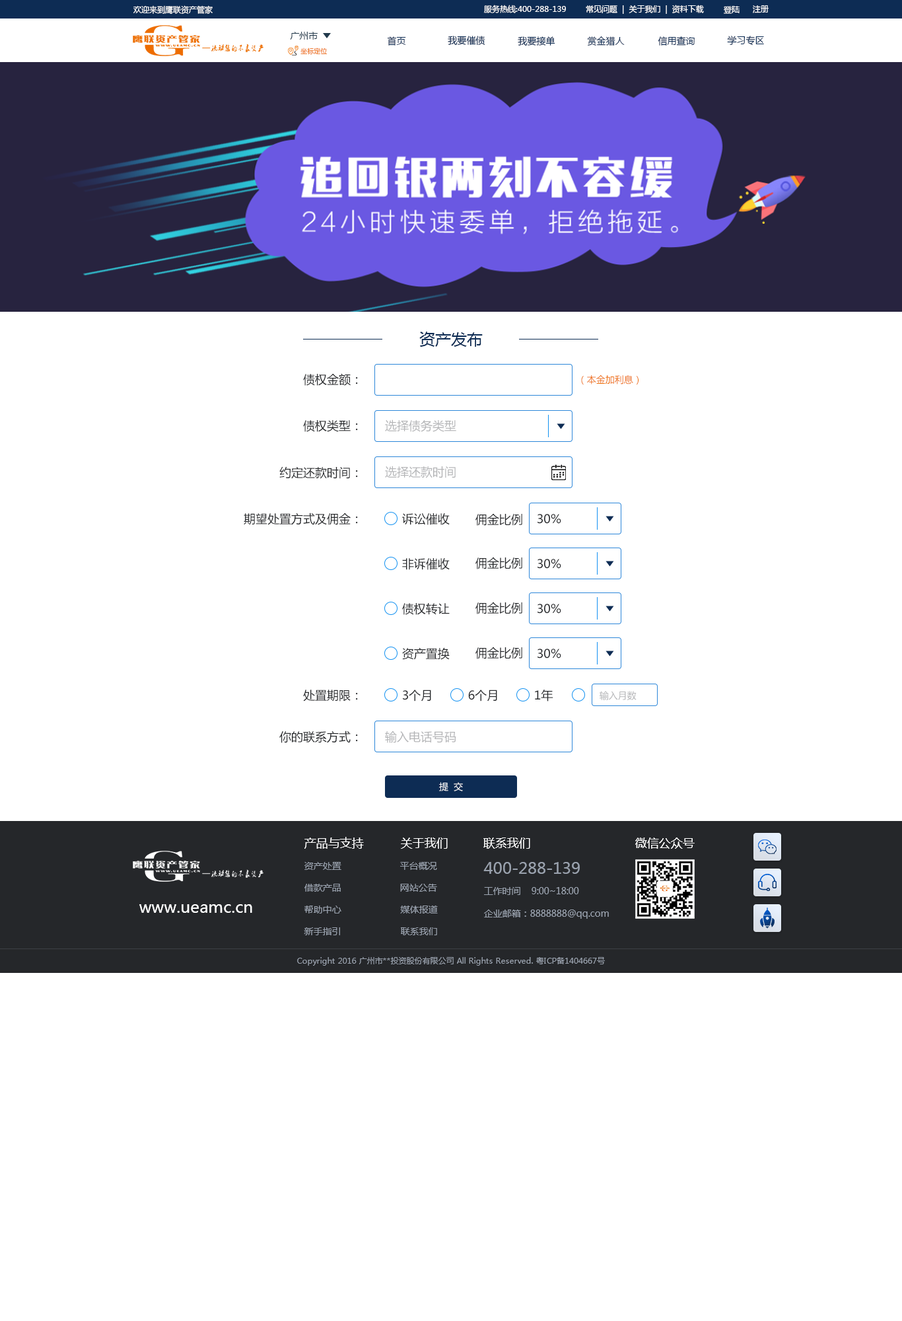
<style>
.page{position:relative;width:902px;height:1321px;background:#ffffff}
.page>*{position:absolute;margin:0}
.t1{font:7.9px "MicrosoftYaHei";color:#fefefe}
.t2{font:9.2px "MicrosoftYaHei";color:#21394b}
.t3{font:9.2px "MicrosoftYaHei";color:#0d2c54}
.t4{font:6.6px "MicrosoftYaHei"}
.t5{font:15.9px "MicrosoftYaHei";color:#0d2c54}
.t6{font:11.9px "MicrosoftYaHei";color:#25272a}
.t7{font:9.2px "MicrosoftYaHei";color:#ed6d00}
.t8{font:11.9px "MicrosoftYaHei";color:#b4b5b7}
.t9{font:9.2px "MicrosoftYaHei";color:#b4b5b7}
.t10{font:9.2px "MicrosoftYaHei";color:#ffffff}
.t11{font:11.9px "MicrosoftYaHei";color:#ffffff}
.t12{font:9.2px "MicrosoftYaHei";color:#99a1ad}
.t13{font:15.9px "MicrosoftYaHei";color:#99a1ad}
.t14{font:15.9px "MicrosoftYaHei";color:#ffffff}
.t15{font:7.9px "MicrosoftYaHei";color:#99a1ad}
</style>
<div class="page">
<p class="t1" style="left:133px;top:5px;width:80px;height:9px">欢迎来到鹰联资产管家</p>
<p class="t1" style="left:484px;top:5px;width:82px;height:8px">服务热线:400-288-139</p>
<p class="t1" style="left:586px;top:5px;width:118px;height:9px">常见问题  |  关于我们  |  资料下载</p>
<p class="t1" style="left:724px;top:6px;width:16px;height:8px">登陆</p>
<p class="t1" style="left:753px;top:5px;width:16px;height:8px">注册</p>
<p class="t2" style="left:290px;top:32px;width:28px;height:8px">广州市</p>
<p class="t3" style="left:387px;top:36px;width:19px;height:10px">首页</p>
<p class="t3" style="left:448px;top:36px;width:38px;height:10px">我要催债</p>
<p class="t3" style="left:518px;top:36px;width:38px;height:10px">我要接单</p>
<p class="t3" style="left:588px;top:36px;width:37px;height:10px">赏金猎人</p>
<p class="t3" style="left:658px;top:36px;width:37px;height:10px">信用查询</p>
<p class="t3" style="left:727px;top:36px;width:37px;height:10px">学习专区</p>
<p class="t4" style="left:301px;top:48px;width:27px;height:7px">坐标定位</p>
<p class="t5" style="left:420px;top:332px;width:63px;height:15px">资产发布</p>
<p class="t6" style="left:303px;top:373px;width:55px;height:13px">债权金额：</p>
<p class="t7" style="left:581px;top:375px;width:58px;height:10px">（本金加利息）</p>
<p class="t6" style="left:303px;top:420px;width:55px;height:12px">债权类型：</p>
<p class="t8" style="left:385px;top:420px;width:72px;height:12px">选择债务类型</p>
<p class="t6" style="left:279px;top:466px;width:79px;height:13px">约定还款时间：</p>
<p class="t8" style="left:385px;top:466px;width:71px;height:12px">选择还款时间</p>
<p class="t6" style="left:244px;top:513px;width:114px;height:12px">期望处置方式及佣金：</p>
<p class="t6" style="left:402px;top:513px;width:48px;height:12px">诉讼催收</p>
<p class="t6" style="left:476px;top:514px;width:47px;height:12px">佣金比例</p>
<p class="t6" style="left:538px;top:514px;width:24px;height:10px">30%</p>
<p class="t6" style="left:476px;top:558px;width:47px;height:11px">佣金比例</p>
<p class="t6" style="left:402px;top:558px;width:48px;height:12px">非诉催收</p>
<p class="t6" style="left:538px;top:559px;width:24px;height:10px">30%</p>
<p class="t6" style="left:402px;top:603px;width:48px;height:12px">债权转让</p>
<p class="t6" style="left:476px;top:603px;width:47px;height:11px">佣金比例</p>
<p class="t6" style="left:538px;top:604px;width:24px;height:10px">30%</p>
<p class="t6" style="left:402px;top:647px;width:48px;height:13px">资产置换</p>
<p class="t6" style="left:476px;top:647px;width:47px;height:12px">佣金比例</p>
<p class="t6" style="left:538px;top:649px;width:24px;height:10px">30%</p>
<p class="t6" style="left:303px;top:690px;width:55px;height:12px">处置期限：</p>
<p class="t6" style="left:403px;top:690px;width:28px;height:12px">3个月</p>
<p class="t6" style="left:468px;top:690px;width:29px;height:12px">6个月</p>
<p class="t6" style="left:535px;top:690px;width:19px;height:12px">1年</p>
<p class="t9" style="left:600px;top:691px;width:37px;height:9px">输入月数</p>
<p class="t6" style="left:279px;top:731px;width:79px;height:12px">你的联系方式：</p>
<p class="t8" style="left:385px;top:731px;width:72px;height:12px">输入电话号码</p>
<p class="t10" style="left:439px;top:782px;width:24px;height:9px">提  交</p>
<p class="t11" style="left:305px;top:837px;width:59px;height:12px">产品与支持</p>
<p class="t11" style="left:401px;top:838px;width:47px;height:11px">关于我们</p>
<p class="t11" style="left:484px;top:838px;width:47px;height:11px">联系我们</p>
<p class="t11" style="left:636px;top:838px;width:59px;height:11px">微信公众号</p>
<p class="t12" style="left:305px;top:862px;width:37px;height:8px">资产处置</p>
<p class="t12" style="left:400px;top:862px;width:37px;height:8px">平台概况</p>
<p class="t13" style="left:484px;top:862px;width:96px;height:12px">400-288-139</p>
<p class="t12" style="left:305px;top:884px;width:36px;height:8px">借款产品</p>
<p class="t12" style="left:400px;top:884px;width:37px;height:8px">网站公告</p>
<p class="t12" style="left:484px;top:887px;width:95px;height:8px">工作时间    9:00~18:00</p>
<p class="t14" style="left:139px;top:904px;width:113px;height:9px">www.ueamc.cn</p>
<p class="t12" style="left:305px;top:906px;width:37px;height:8px">帮助中心</p>
<p class="t12" style="left:400px;top:906px;width:38px;height:8px">媒体报道</p>
<p class="t12" style="left:484px;top:910px;width:125px;height:9px">企业邮箱：8888888@qq.com</p>
<p class="t12" style="left:304px;top:928px;width:36px;height:7px">新手指引</p>
<p class="t12" style="left:401px;top:928px;width:36px;height:7px">联系我们</p>
<p class="t15" style="left:297px;top:957px;width:308px;height:9px">Copyright 2016 广州市**投资股份有限公司 All Rights Reserved. 粤ICP备1404667号</p>
</div>
